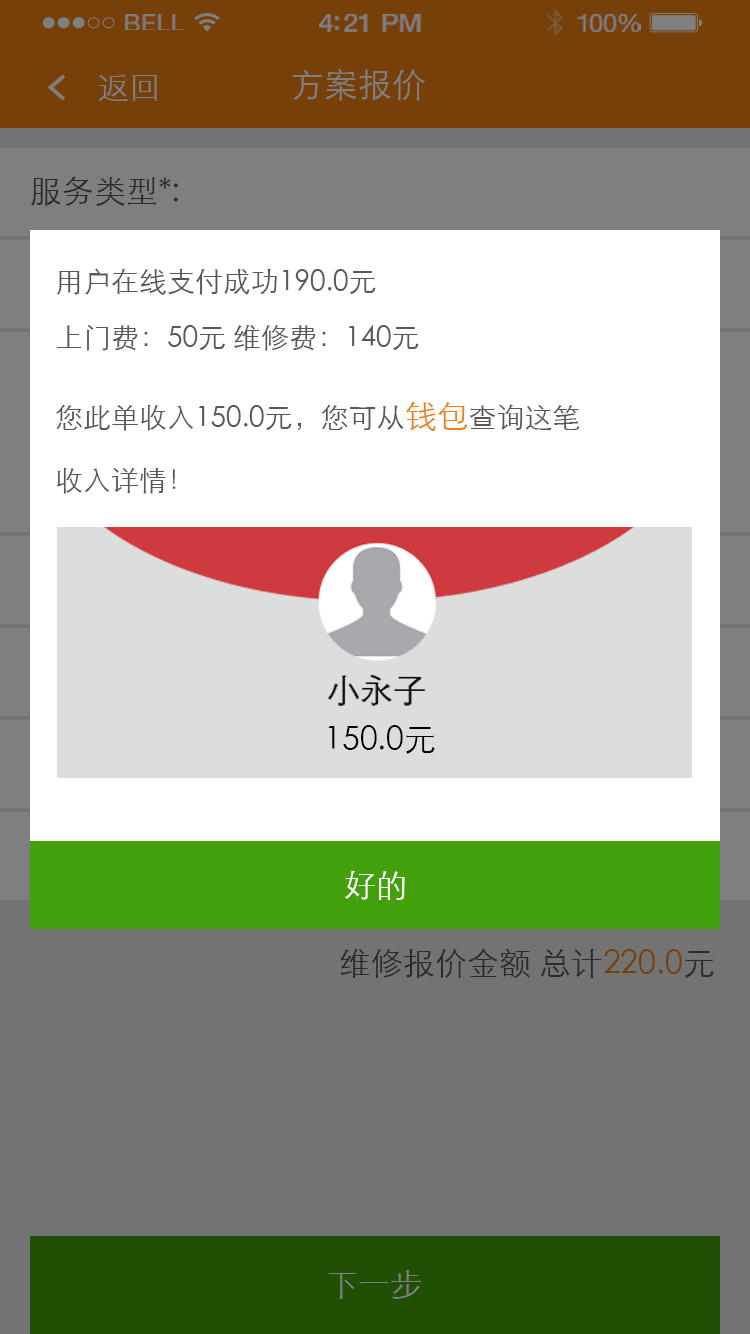
<style>
.page{position:relative;width:750px;height:1334px;background:#737373}
.page>*{position:absolute;margin:0}
.t1{font:23.3px "HelveticaNeue";letter-spacing:0.02em;color:#7f7f7f;scale:1.06 1}
.t2{font:25.3px "HelveticaNeue-Medium";letter-spacing:-0.02em;color:#7f7f7f;scale:1.06 1}
.t3{font:24.3px "HelveticaNeue";letter-spacing:-0.02em;color:#7f7f7f;scale:1.06 1}
.t4{font:32px "STXihei";color:#7f7f7f}
.t5{font:34px "STXihei";color:#7f7f7f}
.t6{font:32px "STXihei";color:#2c2b2b}
.t7{font:28px/56px "STXihei";color:#595757}
.t8{font:28px "STXihei";color:#595757}
.t9{font:32px "STXihei";color:#ef8013}
.t10{font:32px "STXihei";color:#000000}
.t11{font:32px "STXihei";color:#ffffff}
</style>
<div class="page">
<p class="t1" style="left:125px;top:14px;width:61px;height:16px">BELL</p>
<p class="t2" style="left:319px;top:14px;width:102px;height:18px">4:21 PM</p>
<p class="t3" style="left:577px;top:14px;width:64px;height:18px">100%</p>
<p class="t4" style="left:98px;top:74px;width:59px;height:27px">返回</p>
<p class="t5" style="left:292px;top:69px;width:133px;height:32px">方案报价</p>
<p class="t6" style="left:31px;top:176px;width:147px;height:31px">服务类型*:</p>
<p class="t7" style="left:56px;top:268px;width:363px;height:83px">用户在线支付成功190.0元 <br>上门费：50元 维修费：140元</p>
<p class="t8" style="left:56px;top:401px;width:524px;height:30px">您此单收入150.0元，您可从<span class="t9">钱包</span>查询这笔</p>
<p class="t8" style="left:56px;top:467px;width:120px;height:27px">收入详情！</p>
<p class="t10" style="left:328px;top:725px;width:107px;height:29px">150.0元</p>
<p class="t11" style="left:344px;top:870px;width:61px;height:30px">好的</p>
<p class="t6" style="left:340px;top:948px;width:374px;height:30px">维修报价金额 总计220.0元</p>
<p class="t4" style="left:328px;top:1270px;width:93px;height:29px">下一步</p>
</div>
